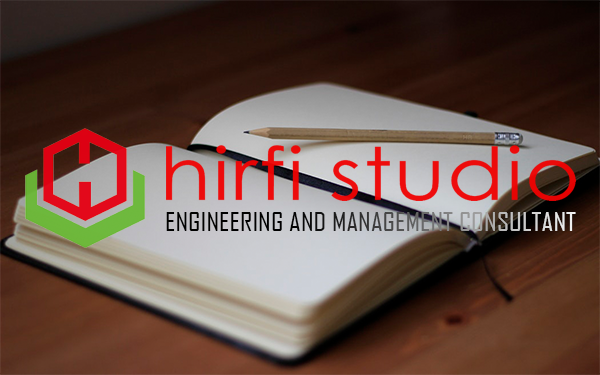
<style>
.page{position:relative;width:600px;height:375px}
.page>*{position:absolute;margin:0}
.t1{font:25px "AgencyFB-Reg";scale:1.17 1}
</style>
<div class="page">
<p class="t1" style="left:166px;top:212px;width:410px;height:19px">ENGINEERING AND MANAGEMENT CONSULTANT</p>
</div>
